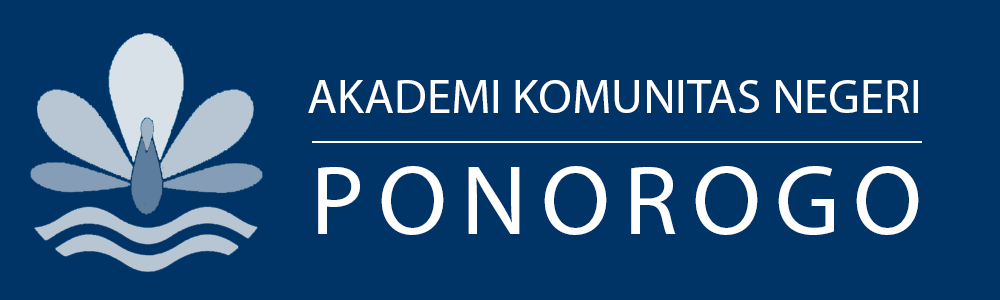
<style>
.page{position:relative;width:1000px;height:300px;background:#003366}
.page>*{position:absolute;margin:0}
.t1{font:48.8px "MyriadPro-Regular";color:#ffffff}
.t2{font:100px "MyriadPro-Regular";letter-spacing:0.14em;color:#ffffff}
</style>
<div class="page">
<p class="t1" style="left:308px;top:80px;width:610px;height:33px">AKADEMI KOMUNITAS NEGERI</p>
<p class="t2" style="left:318px;top:166px;width:601px;height:69px">PONOROGO</p>
</div>
